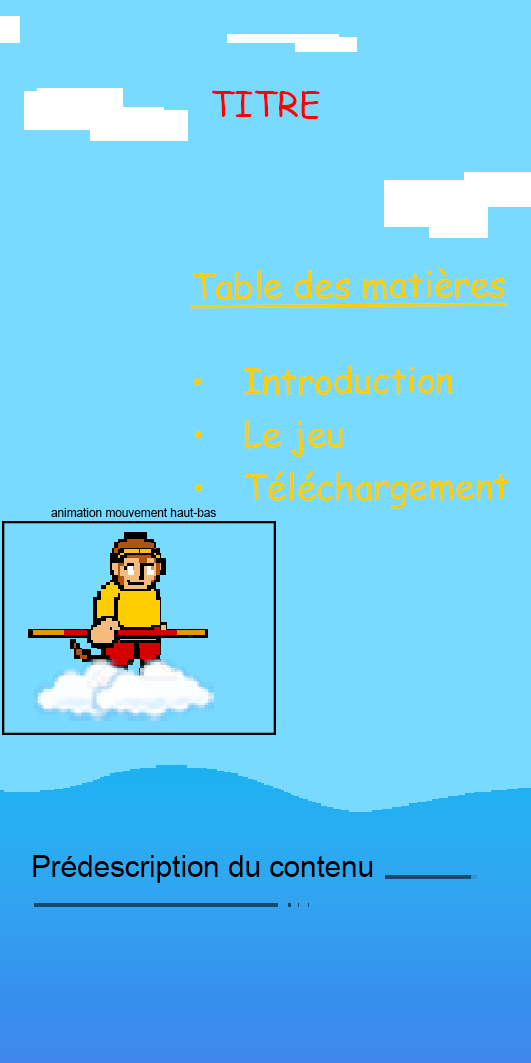
<style>
.page{position:relative;width:531px;height:1063px;background:#78daff}
.page>*{position:absolute;margin:0}
.t1{font:35.4px "ComicSansMS";color:#ff0000}
.t2{font:35.4px/53.1px "ComicSansMS";color:#ffce00}
.t3{font:35.4px "ComicSansMS";color:#ffce00;text-decoration:underline}
.t4{font:11.8px "ArialMT";color:#000000}
.t5{font:29.5px "ArialMT";color:#000000}
</style>
<div class="page">
<p class="t1" style="left:212px;top:90px;width:108px;height:29px">TITRE</p>
<p class="t2" style="left:190px;top:268px;width:319px;height:241px"><span class="t3">Table des matières<br><br></span>Introduction<br>Le jeu<br>Téléchargement</p>
<p class="t4" style="left:51px;top:508px;width:165px;height:9px">animation mouvement haut-bas</p>
<p class="t5" style="left:33px;top:855px;width:340px;height:28px">Prédescription du contenu</p>
</div>
